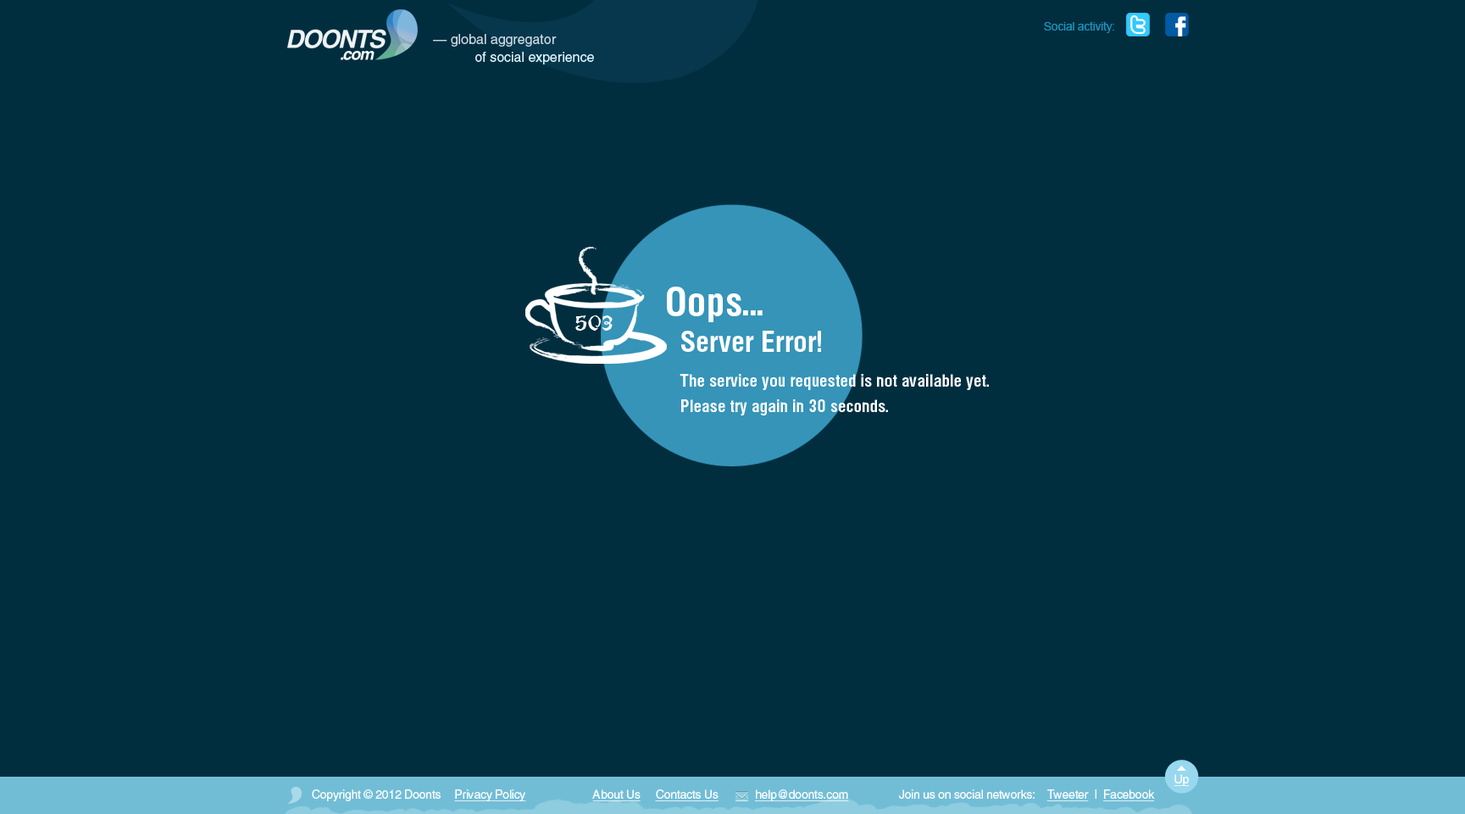
<style>
.page{position:relative;width:1465px;height:814px;background:#012e3f}
.page>*{position:absolute;margin:0}
.t1{font:11.9px "ArialMT";letter-spacing:-0.02em;color:#1898c3}
.t2{font:13.6px "Helvetica";color:#ccd8e2}
.t3{font:13.6px "Helvetica";color:#dff6fe}
.t4{font:39px "HeliosCond-Bold";letter-spacing:0.01em;color:#ffffff}
.t5{font:17px/14.4px "HeliosCond-Bold";letter-spacing:0.01em;color:#ffffff}
.t6{font:28.8px "HeliosCond-Bold";letter-spacing:0.01em;color:#ffffff}
.t7{font:17px/25.4px "HeliosCond-Bold";letter-spacing:0.01em;color:#ffffff}
.t8{font:11.9px "Helios";letter-spacing:-0.02em;color:#ffffff;text-decoration:underline}
.t9{font:11.9px "Helios";letter-spacing:-0.02em;color:#ffffff}
</style>
<div class="page">
<p class="t1" style="left:1044px;top:21px;width:71px;height:12px">Social activity:</p>
<p class="t2" style="left:433px;top:34px;width:124px;height:13px">— global aggregator</p>
<p class="t3" style="left:475px;top:52px;width:119px;height:12px">of social experience</p>
<p class="t4" style="left:667px;top:286px;width:96px;height:36px">Oops...</p>
<p class="t5" style="left:680px;top:331px;width:309px;height:84px"><span class="t6">Server Error!<br><br></span>The service you requested is not available yet.<br><span class="t7">Please try again in 30 seconds.</span></p>
<p class="t8" style="left:1174px;top:774px;width:16px;height:12px">Up</p>
<p class="t9" style="left:312px;top:789px;width:129px;height:12px">Copyright © 2012 Doonts</p>
<p class="t8" style="left:454px;top:789px;width:72px;height:12px">Privacy Policy</p>
<p class="t8" style="left:592px;top:789px;width:257px;height:12px">About Us     Contacts Us            help@doonts.com</p>
<p class="t9" style="left:899px;top:789px;width:136px;height:9px">Join us on social networks:</p>
<p class="t8" style="left:1047px;top:789px;width:108px;height:12px">Tweeter<span class="t9">  |  </span>Facebook</p>
</div>
